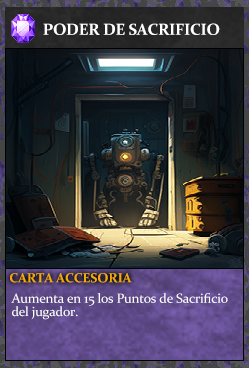
<style>
.page{position:relative;width:249px;height:368px}
.page>*{position:absolute;margin:0}
.t1{font:16px "Constantia-Bold";letter-spacing:-0.02em;color:#ffffff}
.t2{font:13.3px "Constantia-Bold";letter-spacing:-0.02em;color:#f2ac05}
.t3{font:13.3px/13.3px "Constantia";letter-spacing:-0.02em;color:#ffffff}
</style>
<div class="page">
<p class="t1" style="left:43px;top:23px;width:177px;height:12px">PODER DE SACRIFICIO</p>
<p class="t2" style="left:10px;top:273px;width:122px;height:10px">CARTA ACCESORIA</p>
<p class="t3" style="left:11px;top:293px;width:217px;height:27px">Aumenta en 15 los Puntos de Sacrificio<br>del jugador.</p>
</div>
